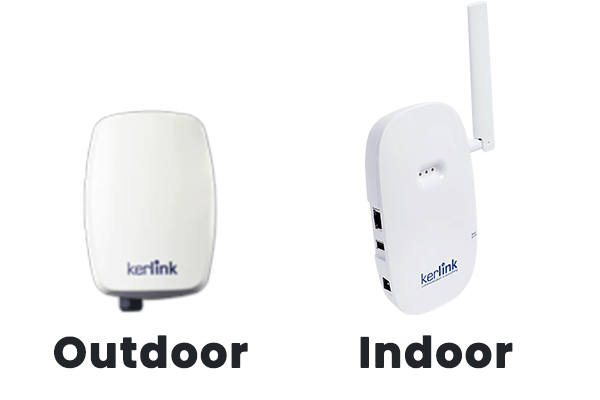
<style>
.page{position:relative;width:600px;height:400px;background:#ffffff}
.page>*{position:absolute;margin:0}
.t1{font:72.7px "Poppins-Bold";letter-spacing:0.03em;color:#212529;font-weight:bold}
</style>
<div class="page">
<p class="t1" style="left:54px;top:335px;width:194px;height:34px">Outdoor</p>
<p class="t1" style="left:360px;top:335px;width:153px;height:34px">Indoor</p>
</div>
